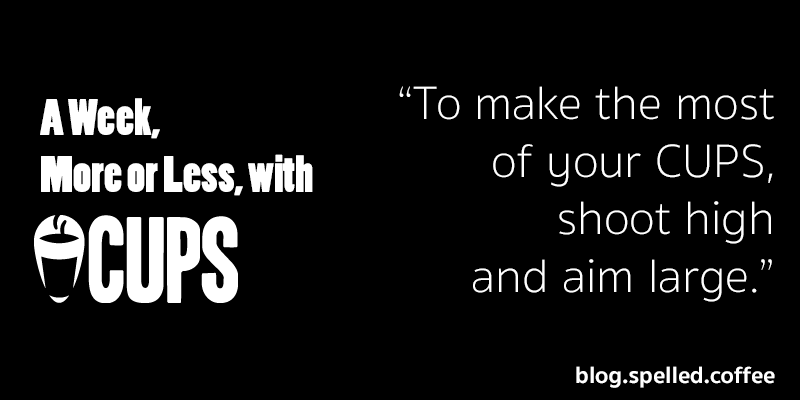
<style>
.page{position:relative;width:800px;height:400px;background:#000000}
.page>*{position:absolute;margin:0}
.t1{font:48px "SukhumvitSet-Thin";color:#ffffff}
.t2{font:48px "PoplarStd";color:#ffffff}
.t3{font:24px "SukhumvitSet-Bold";color:#ffffff}
</style>
<div class="page">
<p class="t1" style="left:399px;top:86px;width:375px;height:216px;text-align:right">“To make the most<br>of your CUPS,<br>shoot high<br>and aim large.”</p>
<p class="t2" style="left:40px;top:98px;width:273px;height:98px">A Week,<br>More or Less, with</p>
<p class="t3" style="left:576px;top:366px;width:199px;height:22px">blog.spelled.coffee</p>
</div>
